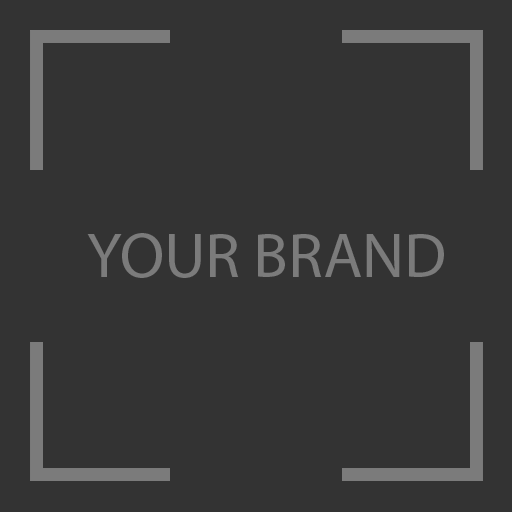
<style>
.page{position:relative;width:512px;height:512px;background:#333333}
.page>*{position:absolute;margin:0}
.t1{font:64px "MyriadPro-Regular";color:#7b7b7b}
</style>
<div class="page">
<p class="t1" style="left:87px;top:233px;width:357px;height:45px">YOUR BRAND</p>
</div>
